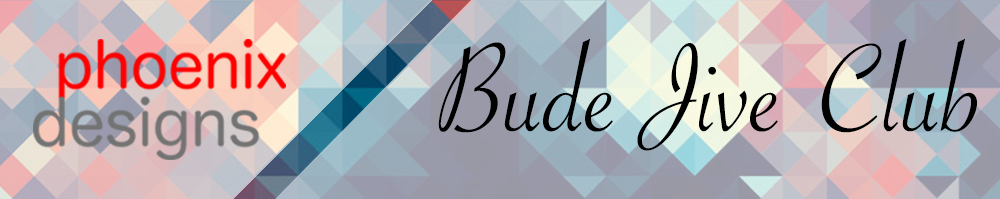
<style>
.page{position:relative;width:1000px;height:199px}
.page>*{position:absolute;margin:0}
.t1{font:133px "SavoyeLetPlain";color:#000000}
</style>
<div class="page">
<p class="t1" style="left:438px;top:38px;width:539px;height:113px">Bude Jive  Club</p>
</div>
